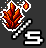
<style>
.page{position:relative;width:46px;height:48px;background:#333333}
.page>*{position:absolute;margin:0}
.t1{font:20.2px "PressStart2P-Regular";color:#ffffff}
.t2{font:20px "PressStart2P-Regular";color:#ffffff}
</style>
<div class="page">
<p class="t1" style="left:13px;top:20px;width:18px;height:18px">/</p>
<p class="t2" style="left:25px;top:31px;width:18px;height:13px">s</p>
</div>
